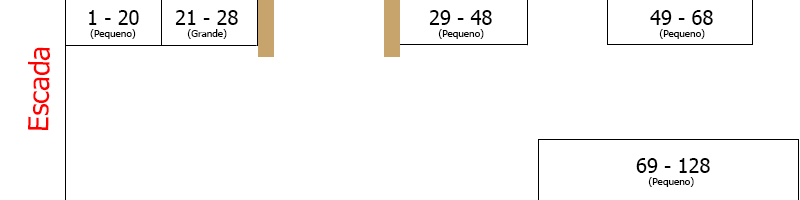
<style>
.page{position:relative;width:800px;height:200px;background:#ffffff}
.page>*{position:absolute;margin:0}
.t1{font:10px "Tahoma";color:#000000}
.t2{font:20px "Tahoma";color:#000000}
.t3{font:28px "Tahoma";color:#ff0000}
</style>
<div class="page">
<p class="t1" style="left:89px;top:10px;width:50px;height:29px"><span class="t2">1 - 20<br></span> (Pequeno)</p>
<p class="t1" style="left:175px;top:10px;width:63px;height:29px"><span class="t2">21 - 28</span><br>    (Grande)</p>
<p class="t1" style="left:429px;top:10px;width:63px;height:29px"><span class="t2">29 - 48</span><br>   (Pequeno)</p>
<p class="t1" style="left:650px;top:10px;width:63px;height:29px"><span class="t2">49 - 68</span><br>   (Pequeno)</p>
<p class="t3" style="left:28px;top:47px;width:22px;height:83px;rotate:-89deg">Escada</p>
<p class="t1" style="left:636px;top:158px;width:74px;height:29px"><span class="t2">69 - 128<br></span>    (Pequeno)</p>
</div>
